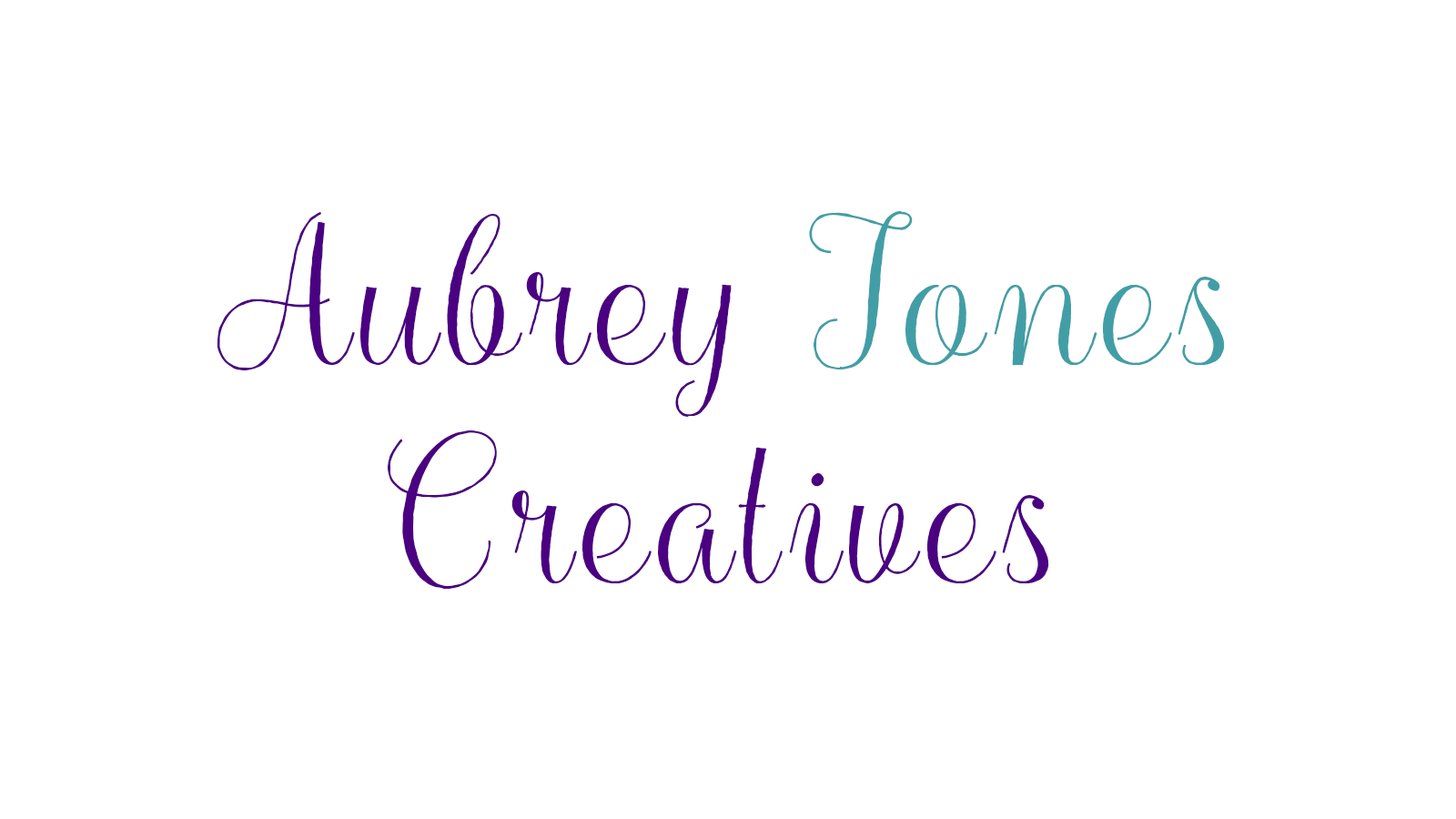
<style>
.page{position:relative;width:1456px;height:819px;background:#ffffff}
.page>*{position:absolute;margin:0}
.t1{font:182px "Balqis";letter-spacing:0.05em;color:#4b0082}
.t2{font:182px "Balqis";letter-spacing:0.05em;color:#429ea6}
</style>
<div class="page">
<p class="t1" style="left:217px;top:211px;width:1008px;height:378px;text-align:center">Aubrey <span class="t2">Jones<br></span>Creatives</p>
</div>
